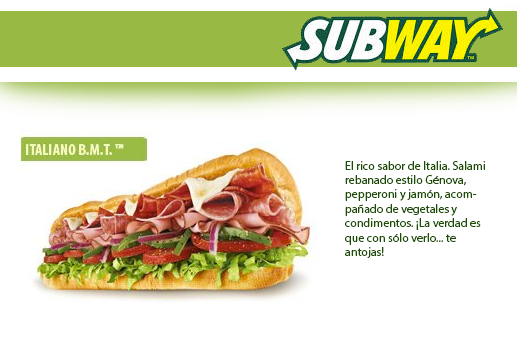
<style>
.page{position:relative;width:517px;height:348px;background:#ffffff}
.page>*{position:absolute;margin:0}
.t1{font:12px "MyriadPro-Regular";color:#1b4e02}
</style>
<div class="page">
<p class="t1" style="left:345px;top:161px;width:140px;height:97px">El rico sabor de Italia. Salami rebanado estilo Génova, pepperoni y jamón, acompañado de vegetales y condimentos. ¡La verdad es que con sólo verlo... te antojas!</p>
</div>
